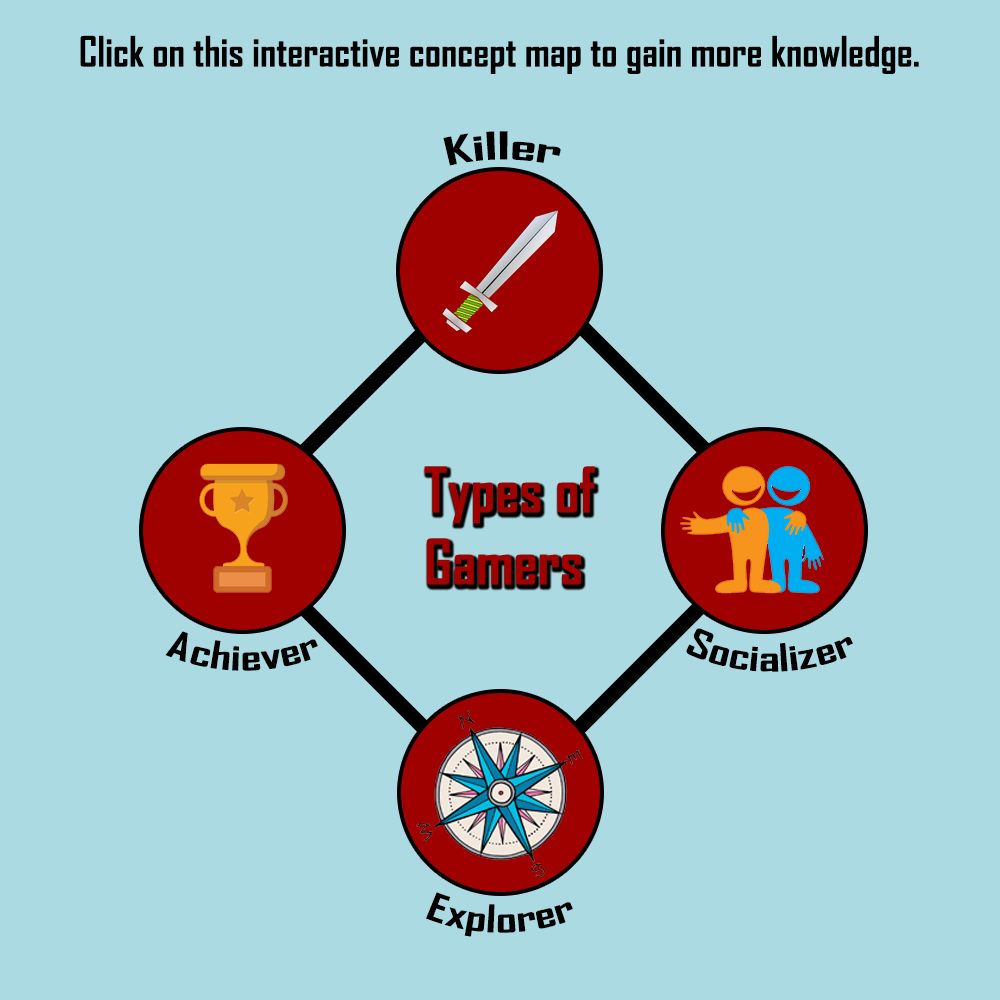
<style>
.page{position:relative;width:1000px;height:1000px;background:#abdae2}
.page>*{position:absolute;margin:0}
.t1{font:40px "AgencyFB-Bold";color:#000000}
.t2{font:36px "AgencyFB-Bold";color:#000000}
.t3{font:60px "AgencyFB-Bold";color:#9f0000}
</style>
<div class="page">
<p class="t1" style="left:80px;top:35px;width:839px;height:39px">Click on this interactive concept map to gain more knowledge.</p>
<p class="t2" style="left:443px;top:131px;width:118px;height:35px">Killer</p>
<p class="t3" style="left:424px;top:466px;width:171px;height:119px">Types of Gamers</p>
<p class="t2" style="left:686px;top:628px;width:167px;height:44px">Socializer</p>
<p class="t2" style="left:165px;top:631px;width:153px;height:40px">Achiever</p>
<p class="t2" style="left:426px;top:892px;width:147px;height:45px">Explorer</p>
</div>
